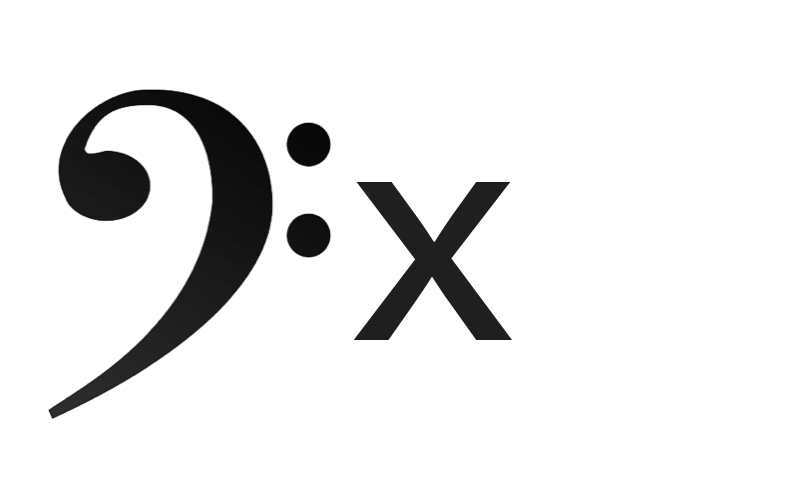
<style>
.page{position:relative;width:800px;height:500px;background:#ffffff}
.page>*{position:absolute;margin:0}
.t1{font:327.4px "MyriadPro-Regular";letter-spacing:-0.1em;color:#070707;scale:1.09 1}
</style>
<div class="page">
<p class="t1" style="left:353px;top:182px;width:159px;height:158px;opacity:0.9">x</p>
</div>
